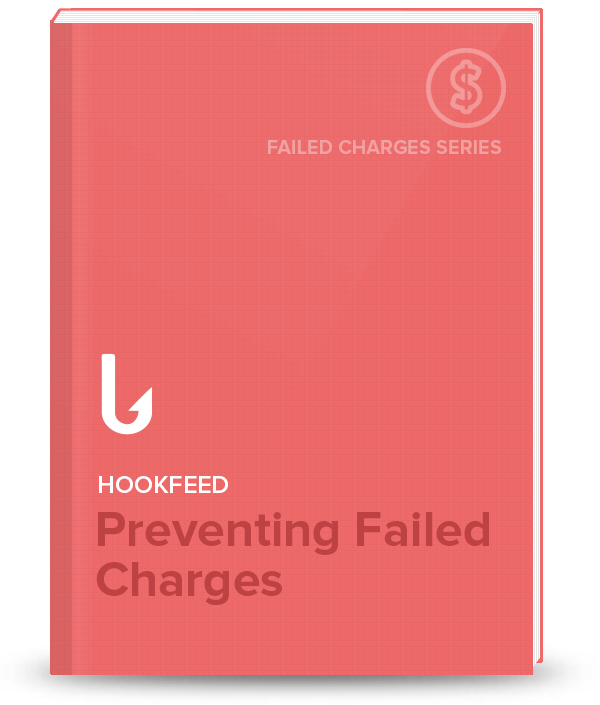
<style>
.page{position:relative;width:600px;height:705px;background:#f06868}
.page>*{position:absolute;margin:0}
.t1{font:20px "ProximaNova-Bold";color:#f5a1a1}
.t2{font:25px "ProximaNova-Semibold";color:#ffffff;text-transform:uppercase}
.t3{font:49.9px/49.9px "ProximaNova-Bold";color:#be4242}
</style>
<div class="page">
<p class="t1" style="left:268px;top:140px;width:233px;height:14px">FAILED CHARGES SERIES</p>
<p class="t2" style="left:99px;top:476px;width:129px;height:17px">HookFeed</p>
<p class="t3" style="left:96px;top:512px;width:393px;height:93px">Preventing Failed Charges</p>
</div>
